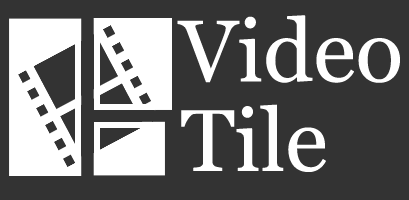
<style>
.page{position:relative;width:409px;height:200px;background:#333333}
.page>*{position:absolute;margin:0}
.t1{font:150px "Georgia";color:#ffffff}
</style>
<div class="page">
<p class="t1" style="left:177px;top:15px;width:223px;height:68px">Video</p>
<p class="t1" style="left:181px;top:104px;width:145px;height:68px">Tile</p>
</div>
